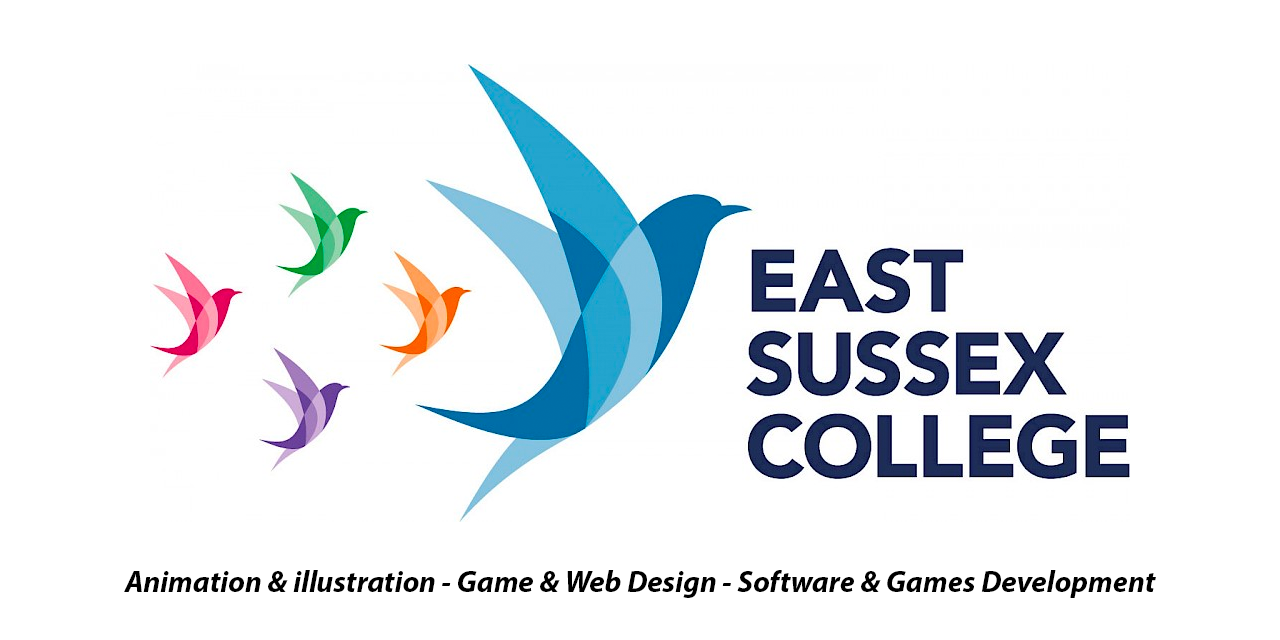
<style>
.page{position:relative;width:1280px;height:640px;background:#ffffff}
.page>*{position:absolute;margin:0}
.t1{font:30px "MyriadPro-BoldIt";color:#000000}
</style>
<div class="page">
<p class="t1" style="left:124px;top:570px;width:1032px;height:28px">Animation &amp; illustration - Game &amp; Web Design - Software &amp; Games Development</p>
</div>
